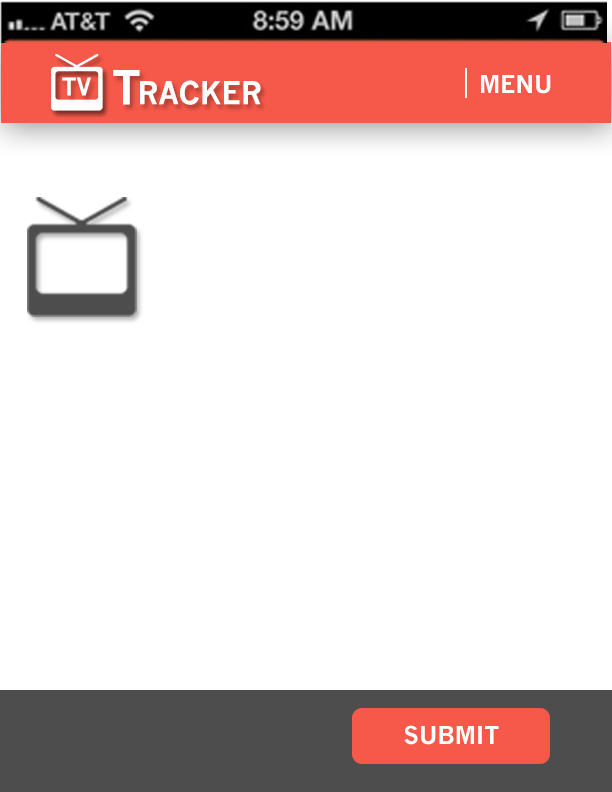
<style>
.page{position:relative;width:612px;height:792px;background:#ffffff}
.page>*{position:absolute;margin:0}
.t1{font:24px "NewsGothicMT-Bold";color:#ffffff}
.t2{font:46.1px "NewsGothicMT-Bold";color:#ffffff}
.t3{font:30.7px "NewsGothicMT-Bold";color:#ffffff}
</style>
<div class="page">
<p class="t1" style="left:62px;top:77px;width:29px;height:19px">TV</p>
<p class="t2" style="left:113px;top:70px;width:27px;height:35px">T</p>
<p class="t1" style="left:481px;top:75px;width:70px;height:19px">MENU</p>
<p class="t3" style="left:140px;top:80px;width:121px;height:25px">RACKER</p>
<p class="t1" style="left:404px;top:725px;width:95px;height:20px">SUBMIT</p>
</div>
